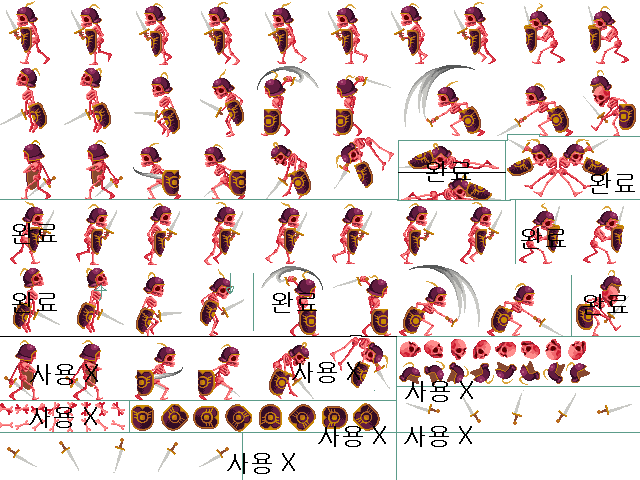
<style>
.page{position:relative;width:640px;height:480px;background:#ffffff}
.page>*{position:absolute;margin:0}
.t1{font:24px "Gulim";color:#000000}
</style>
<div class="page">
<p class="t1" style="left:426px;top:161px;width:45px;height:21px">완료</p>
<p class="t1" style="left:590px;top:173px;width:45px;height:21px">완료</p>
<p class="t1" style="left:12px;top:223px;width:45px;height:21px">완료</p>
<p class="t1" style="left:521px;top:228px;width:45px;height:21px">완료</p>
<p class="t1" style="left:12px;top:292px;width:45px;height:21px">완료</p>
<p class="t1" style="left:272px;top:292px;width:45px;height:21px">완료</p>
<p class="t1" style="left:583px;top:294px;width:45px;height:21px">완료</p>
<p class="t1" style="left:30px;top:364px;width:68px;height:21px">사용 X</p>
<p class="t1" style="left:292px;top:362px;width:68px;height:21px">사용 X</p>
<p class="t1" style="left:405px;top:381px;width:68px;height:21px">사용 X</p>
<p class="t1" style="left:29px;top:407px;width:68px;height:21px">사용 X</p>
<p class="t1" style="left:318px;top:426px;width:68px;height:21px">사용 X</p>
<p class="t1" style="left:404px;top:426px;width:68px;height:21px">사용 X</p>
<p class="t1" style="left:227px;top:453px;width:68px;height:21px">사용 X</p>
</div>
